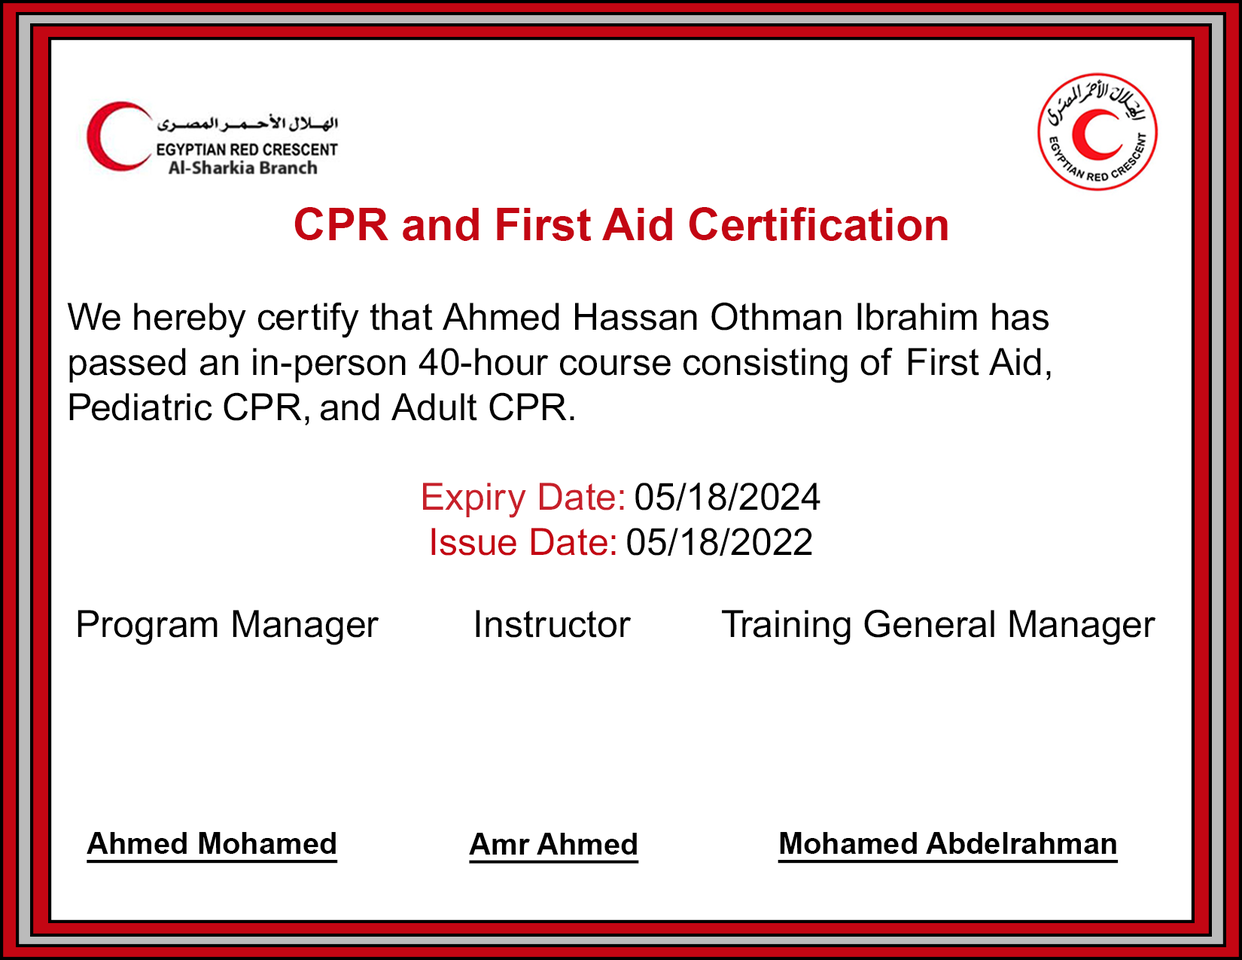
<style>
.page{position:relative;width:1242px;height:960px;background:#ffffff}
.page>*{position:absolute;margin:0}
.t1{font:45.1px "Arial-BoldMT";color:#c30613}
.t2{font:37.6px "ArialMT";color:#000000}
.t3{font:37.6px "ArialMT";color:#c7202a}
.t4{font:37.6px "ArialMT";color:#c30613}
.t5{font:30.1px "Arial-BoldMT";color:#000000;text-decoration:underline}
</style>
<div class="page">
<p class="t1" style="left:294px;top:207px;width:654px;height:34px">CPR and First Aid Certification</p>
<p class="t2" style="left:67px;top:302px;width:984px;height:254px">We hereby certify that Ahmed Hassan Othman Ibrahim has passed an in-person 40-hour course consisting of First Aid, Pediatric CPR, and Adult CPR.<br><br><span class="t3">Expiry Date: </span>05/18/2024<br><span class="t4">Issue Date: </span>05/18/2022</p>
<p class="t2" style="left:78px;top:609px;width:1078px;height:36px">Program Manager         Instructor         Training General Manager</p>
<p class="t5" style="left:87px;top:832px;width:251px;height:32px">Ahmed Mohamed</p>
<p class="t5" style="left:469px;top:833px;width:170px;height:31px">Amr Ahmed</p>
<p class="t5" style="left:778px;top:832px;width:341px;height:32px">Mohamed Abdelrahman</p>
</div>
